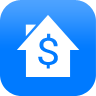
<style>
.page{position:relative;width:96px;height:96px;background:#007aff}
.page>*{position:absolute;margin:0}
.t1{font:37.4px "Roboto-Regular";color:#007aff;scale:1.15 1}
</style>
<div class="page">
<p class="t1" style="left:38px;top:33px;width:20px;height:36px">$</p>
</div>
